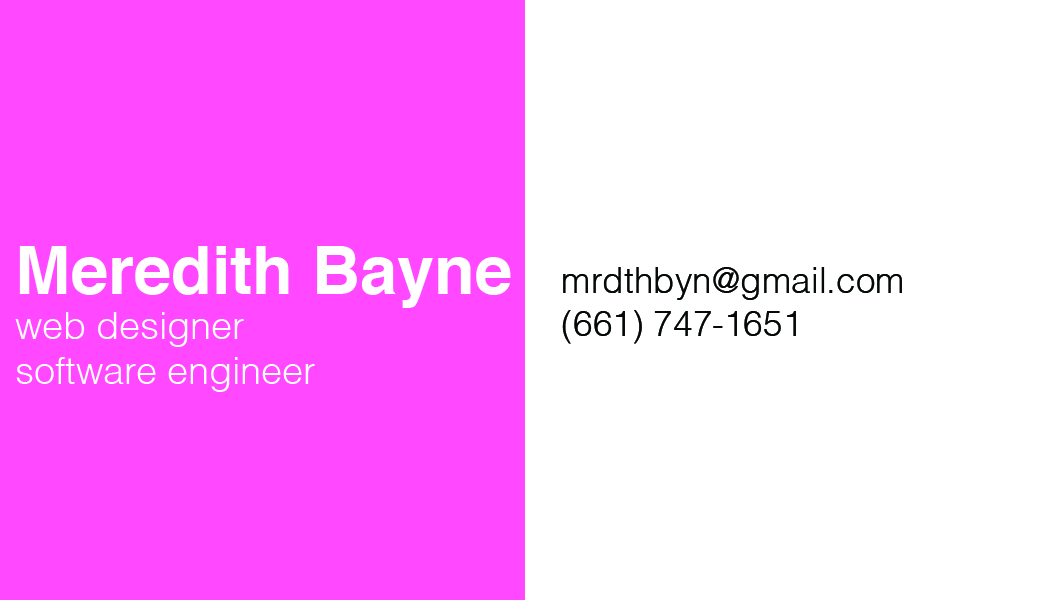
<style>
.page{position:relative;width:1050px;height:600px;background:#ffffff}
.page>*{position:absolute;margin:0}
.t1{font:37.5px "Helvetica-Light";color:#ffffff}
.t2{font:66.7px "Helvetica-Bold";color:#ffffff}
.t3{font:35.8px "Helvetica-Light";color:#060808}
</style>
<div class="page">
<p class="t1" style="left:15px;top:246px;width:496px;height:146px"><span class="t2">Meredith Bayne<br></span>web designer<br>software engineer</p>
<p class="t3" style="left:562px;top:267px;width:340px;height:77px">mrdthbyn@gmail.com<br>(661) 747-1651</p>
</div>
